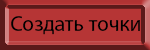
<style>
.page{position:relative;width:150px;height:50px;background:#b63535}
.page>*{position:absolute;margin:0}
.t1{font:21.3px "MyriadPro-Regular";color:#000000}
</style>
<div class="page">
<p class="t1" style="left:11px;top:16px;width:129px;height:19px">Создать точки</p>
</div>
